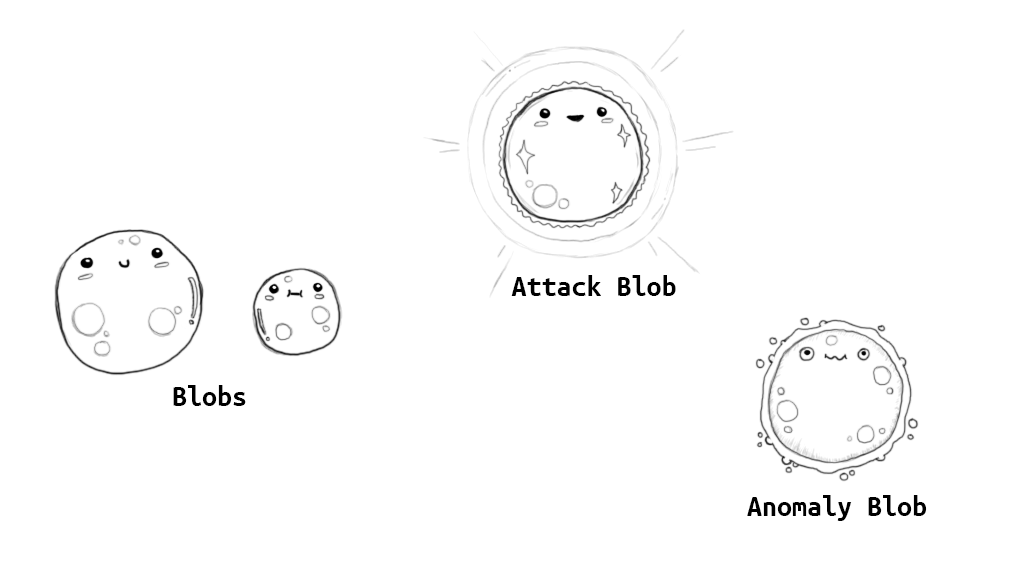
<style>
.page{position:relative;width:1024px;height:576px;background:#ffffff}
.page>*{position:absolute;margin:0}
.t1{font:30px "UbuntuMono-Bold";color:#000000}
</style>
<div class="page">
<p class="t1" style="left:511px;top:275px;width:165px;height:21px">Attack Blob</p>
<p class="t1" style="left:173px;top:385px;width:73px;height:21px">Blobs</p>
<p class="t1" style="left:747px;top:495px;width:180px;height:26px">Anomaly Blob</p>
</div>
